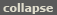
<style>
.page{position:relative;width:57px;height:15px;background:#5a5a5a}
.page>*{position:absolute;margin:0}
.t1{font:11px "Verdana-Bold";color:#dedbcb}
</style>
<div class="page">
<p class="t1" style="left:3px;top:3px;width:50px;height:11px">collapse</p>
</div>
